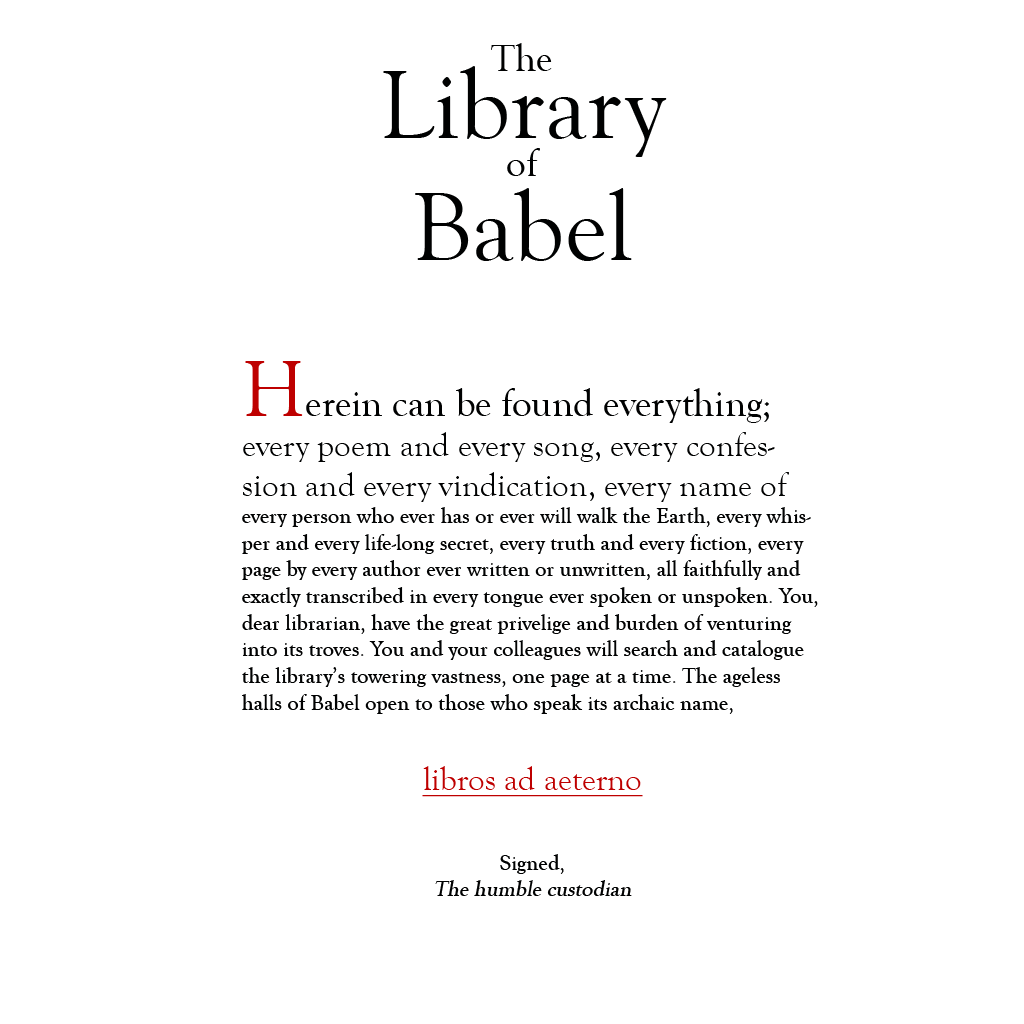
<style>
.page{position:relative;width:1024px;height:1024px;background:#ffffff}
.page>*{position:absolute;margin:0}
.t1{font:100px/66.7px "GoudyOldStyleT-Regular";color:#000101}
.t2{font:38.9px/66.7px "GoudyOldStyleT-Regular";color:#000101}
.t3{font:38.9px/38.9px "GoudyOldStyleT-Regular";color:#000101}
.t4{font:100px/83.3px "GoudyOldStyleT-Regular";color:#000101}
.t5{font:22.2px "GoudyOldStyleT-Regular";color:#000101}
.t6{font:83.3px "GoudyOldStyleT-Regular";color:#be0000}
.t7{font:38.9px "GoudyOldStyleT-Regular";color:#000101}
.t8{font:33.3px "GoudyOldStyleT-Regular";color:#000101}
.t9{font:33.3px "GoudyOldStyleT-Regular";color:#be0000;text-decoration:underline}
.t10{font:22.2px "GoudyOldStyleT-Regular";color:#000101;font-style:italic}
</style>
<div class="page">
<p class="t1" style="left:383px;top:43px;width:284px;height:218px;text-align:center"><span class="t2">The<br></span>Library<br><span class="t3">of<br></span><span class="t4">Babel</span></p>
<p class="t5" style="left:241px;top:361px;width:577px;height:535px"><span class="t6">H</span><span class="t7">erein can be found everything; </span><span class="t8">every poem and every song, every confession and every vindication, every name of </span>every person who ever has or ever will walk the Earth, every whisper and every life-long secret, every truth and every fiction, every page by every author ever written or unwritten, all faithfully and exactly transcribed in every tongue ever spoken or unspoken. You, dear librarian, have the great privelige and burden of venturing into its troves. You and your colleagues will search and catalogue the library’s towering vastness, one page at a time. The ageless halls of Babel open to those who speak its archaic name,<br><br><span class="t9">libros ad aeterno<br><br> <br></span>Signed, <br><span class="t10">The humble custodian</span></p>
</div>
